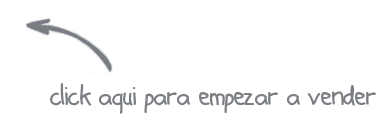
<style>
.page{position:relative;width:391px;height:120px;background:#ffffff}
.page>*{position:absolute;margin:0}
.t1{font:36px "adamshand";color:#7b7e83}
</style>
<div class="page">
<p class="t1" style="left:50px;top:83px;width:326px;height:31px">click aqui para empezar a vender</p>
</div>
